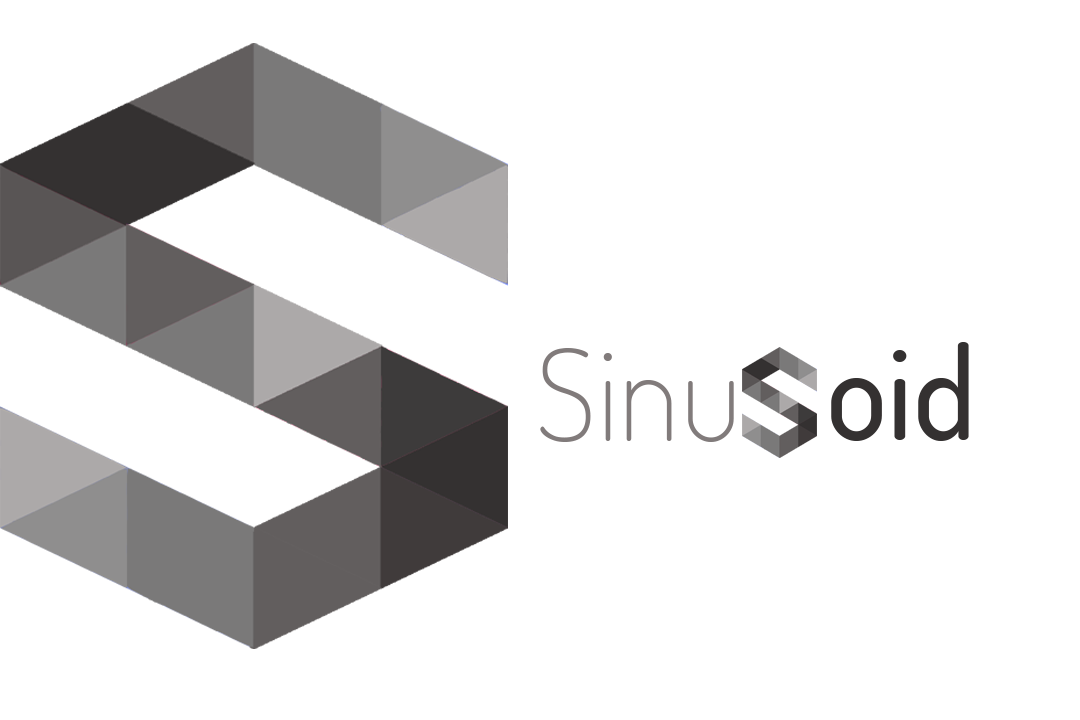
<style>
.page{position:relative;width:1080px;height:720px;background:#ffffff}
.page>*{position:absolute;margin:0}
.t1{font:128px "Dosis-Medium";color:#343131}
.t2{font:128px "Dosis-ExtraLight";color:#817b7b}
</style>
<div class="page">
<p class="t1" style="left:831px;top:342px;width:138px;height:99px">oid</p>
<p class="t2" style="left:540px;top:348px;width:194px;height:94px">Sinu</p>
</div>
